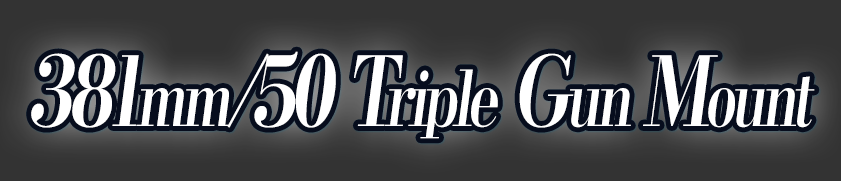
<style>
.page{position:relative;width:841px;height:181px;background:#333333}
.page>*{position:absolute;margin:0}
.t1{font:96px "KochoStd-Heavy";letter-spacing:-0.08em;color:#ffffff;font-style:italic;scale:0.75 1}
.t2{font:76.8px "KochoStd-Heavy";letter-spacing:-0.08em;color:#ffffff;font-style:italic;scale:0.75 1}
</style>
<div class="page">
<p class="t1" style="left:31px;top:51px;width:784px;height:88px">381<span class="t2">mm</span>/50 T<span class="t2">riple</span> G<span class="t2">un </span>M<span class="t2">ount</span></p>
</div>
